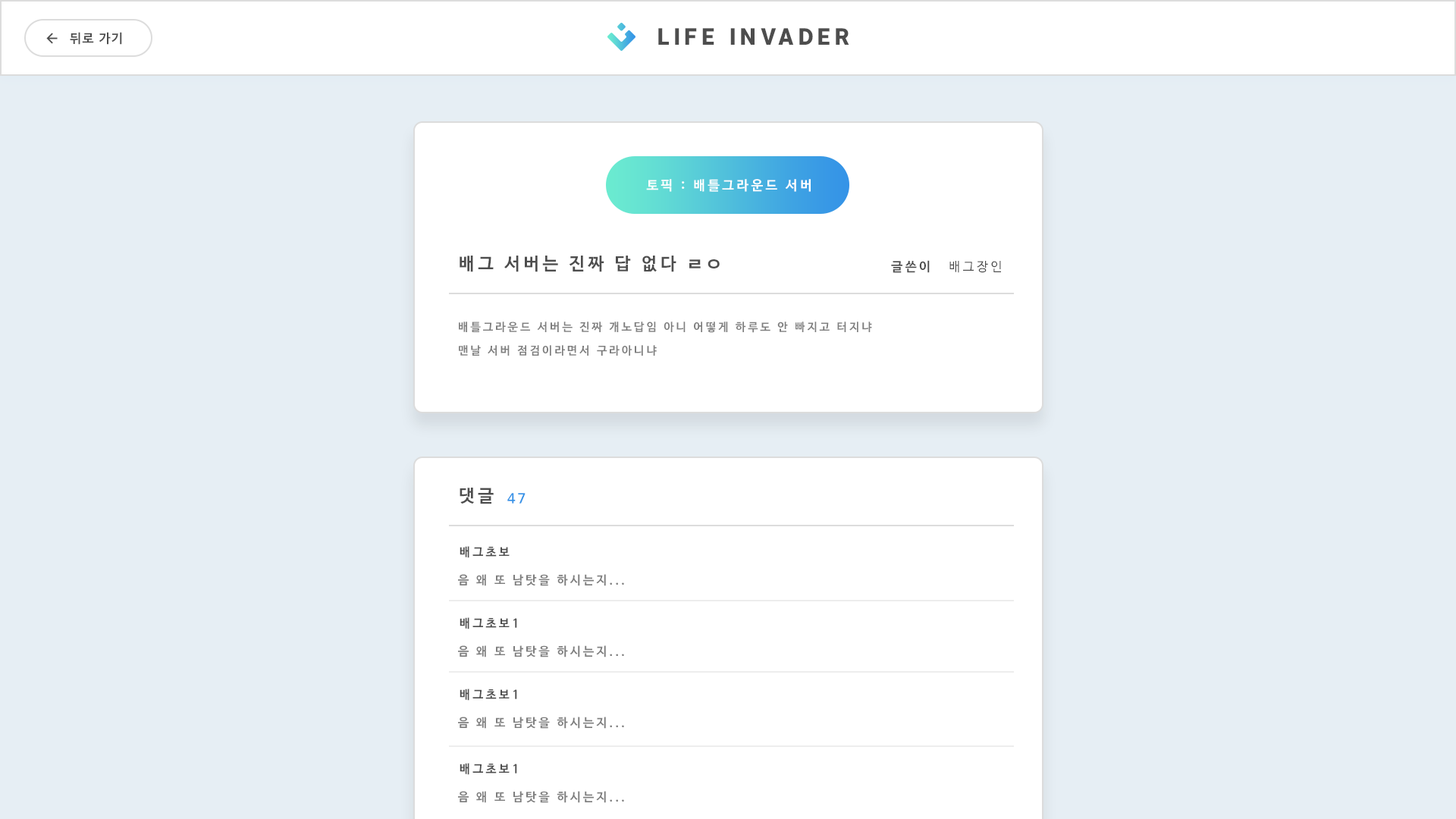
<style>
.page{position:relative;width:1456px;height:819px;background:#e6eef4}
.page>*{position:absolute;margin:0}
.t1{font:22.5px "InterUI-Black";letter-spacing:0.2em;color:#4d4d4d}
.t2{font:12.6px "NanumBarunGothicBold";letter-spacing:0.1em;color:#4d4d4d}
.t3{font:13.4px "NanumBarunGothicBold";letter-spacing:0.2em;color:#ffffff}
.t4{font:17.5px "NanumBarunGothicBold";letter-spacing:0.2em;color:#4d4d4d}
.t5{font:12.8px "NanumBarunGothicBold";letter-spacing:0.2em;color:#4d4d4d}
.t6{font:12.8px "NanumBarunGothic";letter-spacing:0.2em;color:#4d4d4d}
.t7{font:11.4px "NanumBarunGothicBold";letter-spacing:0.2em;color:#7e7e7e}
.t8{font:13.2px "NanumBarunGothicBold";letter-spacing:0.2em;color:#3593e7}
.t9{font:12px "NanumBarunGothicBold";letter-spacing:0.2em;color:#4d4d4d}
.t10{font:12px "NanumBarunGothicBold";letter-spacing:0.2em;color:#7e7e7e}
</style>
<div class="page">
<p class="t1" style="left:658px;top:28px;width:191px;height:17px">LIFE INVADER</p>
<p class="t2" style="left:70px;top:32px;width:52px;height:13px">뒤로 가기</p>
<p class="t3" style="left:646px;top:179px;width:165px;height:13px">토픽 : 배틀그라운드 서버</p>
<p class="t4" style="left:460px;top:256px;width:260px;height:16px">배그 서버는 진짜 답 없다 ㄹㅇ</p>
<p class="t5" style="left:891px;top:260px;width:39px;height:13px">글쓴이</p>
<p class="t6" style="left:949px;top:261px;width:52px;height:12px">배그장인</p>
<p class="t7" style="left:459px;top:322px;width:413px;height:11px">배틀그라운드 서버는 진짜 개노답임 아니 어떻게 하루도 안 빠지고 터지냐</p>
<p class="t7" style="left:459px;top:345px;width:198px;height:11px">맨날 서버 점검이라면서 구라아니냐</p>
<p class="t4" style="left:460px;top:488px;width:34px;height:16px">댓글</p>
<p class="t8" style="left:507px;top:493px;width:19px;height:11px">47</p>
<p class="t9" style="left:460px;top:546px;width:50px;height:12px">배그초보</p>
<p class="t10" style="left:458px;top:574px;width:166px;height:12px">음 왜 또 남탓을 하시는지...</p>
<p class="t9" style="left:460px;top:617px;width:57px;height:12px">배그초보1</p>
<p class="t10" style="left:458px;top:645px;width:166px;height:12px">음 왜 또 남탓을 하시는지...</p>
<p class="t9" style="left:460px;top:689px;width:57px;height:12px">배그초보1</p>
<p class="t10" style="left:458px;top:717px;width:166px;height:12px">음 왜 또 남탓을 하시는지...</p>
<p class="t9" style="left:460px;top:763px;width:57px;height:12px">배그초보1</p>
<p class="t10" style="left:458px;top:791px;width:166px;height:12px">음 왜 또 남탓을 하시는지...</p>
</div>
